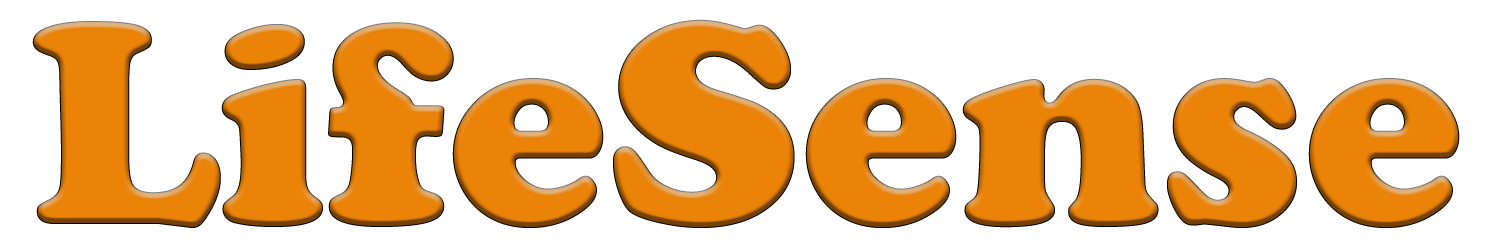
<style>
.page{position:relative;width:1500px;height:250px;background:#ffffff}
.page>*{position:absolute;margin:0}
.t1{font:300px "CooperBlack";color:#eb8308}
</style>
<div class="page">
<p class="t1" style="left:32px;top:19px;width:1428px;height:209px">LifeSense</p>
</div>
